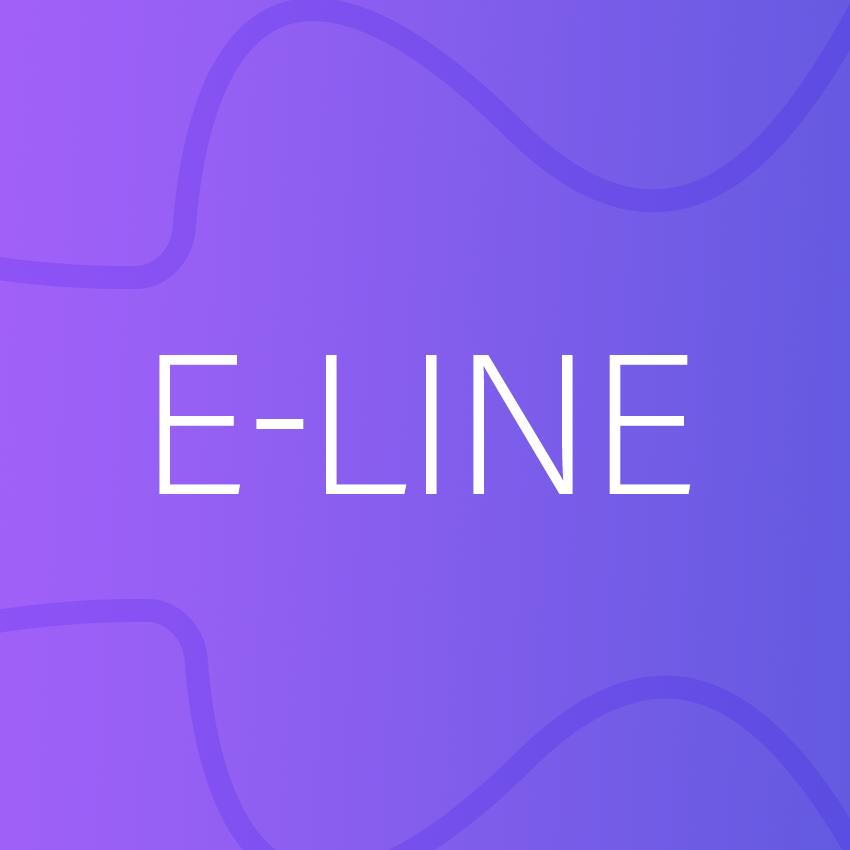
<style>
.page{position:relative;width:850px;height:850px}
.page>*{position:absolute;margin:0}
.t1{font:200px "AcuminConcept-SemiCondensedExtraLight";color:#ffffff;text-transform:uppercase;font-weight:bold}
</style>
<div class="page">
<p class="t1" style="left:159px;top:355px;width:532px;height:139px">E-line</p>
</div>
